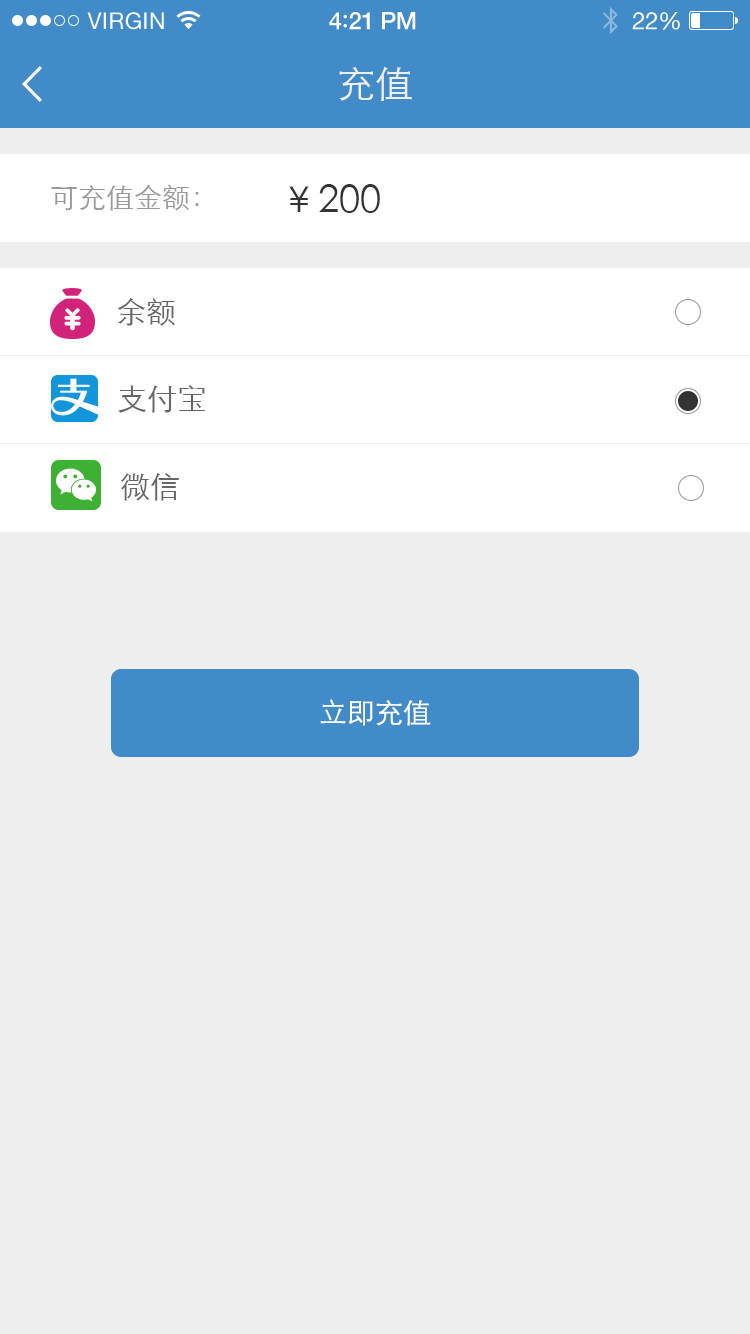
<style>
.page{position:relative;width:750px;height:1334px;background:#eeeeee}
.page>*{position:absolute;margin:0}
.t1{font:23px "HelveticaNeue";letter-spacing:0.02em;color:#ffffff}
.t2{font:24px "HelveticaNeue-Medium";letter-spacing:-0.02em;color:#ffffff}
.t3{font:26px "Avenir-Medium";letter-spacing:-0.02em;color:#ffffff}
.t4{font:24px "HelveticaNeue";letter-spacing:-0.02em;color:#ffffff}
.t5{font:38px "STXihei";color:#eeeeee}
.t6{font:28px "STXihei";color:#999999}
.t7{font:38px "STXihei";color:#333333}
.t8{font:30px "STXihei";color:#666666}
.t9{font:28px "STXihei";color:#ffffff}
</style>
<div class="page">
<p class="t1" style="left:87px;top:12px;width:77px;height:18px">VIRGIN</p>
<p class="t2" style="left:329px;top:12px;width:87px;height:18px">4<span class="t3">:</span>21 PM</p>
<p class="t4" style="left:632px;top:12px;width:48px;height:18px">22%</p>
<p class="t5" style="left:339px;top:66px;width:73px;height:35px">充值</p>
<p class="t6" style="left:51px;top:184px;width:148px;height:27px">可充值金额：</p>
<p class="t7" style="left:289px;top:184px;width:91px;height:29px">￥200</p>
<p class="t8" style="left:117px;top:298px;width:58px;height:28px">余额</p>
<p class="t8" style="left:118px;top:385px;width:87px;height:28px">支付宝</p>
<p class="t8" style="left:120px;top:473px;width:59px;height:28px">微信</p>
<p class="t9" style="left:320px;top:699px;width:111px;height:27px">立即充值</p>
</div>
